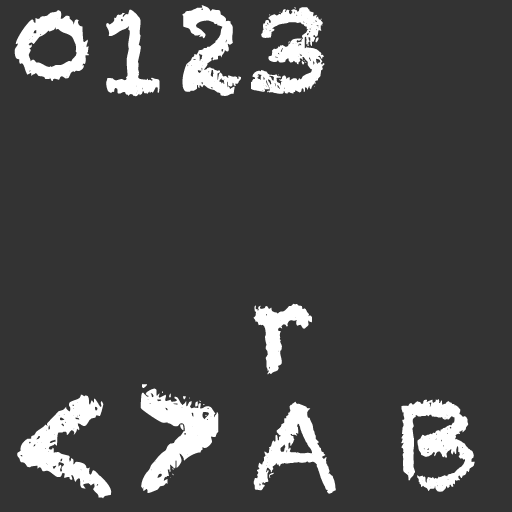
<style>
.page{position:relative;width:512px;height:512px;background:#333333}
.page>*{position:absolute;margin:0}
.t1{font:120px "Chalkduster";letter-spacing:-0.05em;color:#ffffff}
.t2{font:200px "Chalkduster";letter-spacing:-0.05em;color:#ffffff}
</style>
<div class="page">
<p class="t1" style="left:182px;top:5px;width:59px;height:91px">2</p>
<p class="t1" style="left:14px;top:10px;width:75px;height:71px">0</p>
<p class="t1" style="left:106px;top:9px;width:54px;height:88px">1</p>
<p class="t1" style="left:251px;top:7px;width:74px;height:87px">3</p>
<p class="t1" style="left:253px;top:303px;width:59px;height:72px">r</p>
<p class="t2" style="left:140px;top:384px;width:79px;height:109px">&gt;</p>
<p class="t2" style="left:17px;top:394px;width:95px;height:105px">&lt;</p>
<p class="t1" style="left:253px;top:401px;width:83px;height:93px">A</p>
<p class="t1" style="left:401px;top:399px;width:74px;height:93px">B</p>
</div>
